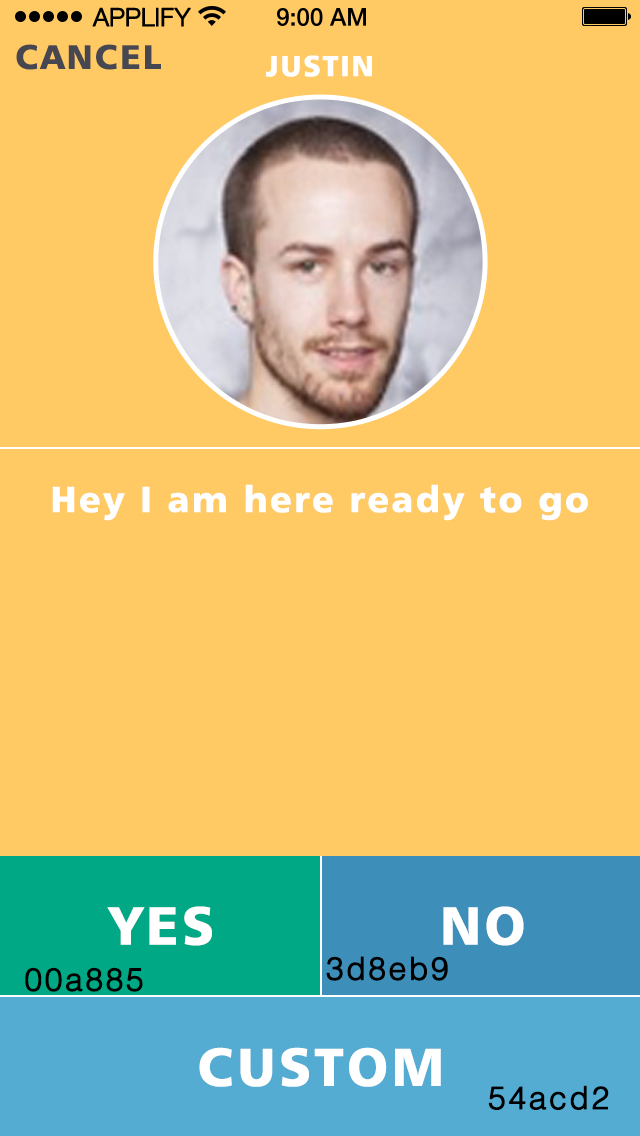
<style>
.page{position:relative;width:640px;height:1136px;background:#ffc964}
.page>*{position:absolute;margin:0}
.t1{font:25px "HelveticaNeueLTCom-Lt";letter-spacing:-0.02em;color:#000000;font-weight:bold}
.t2{font:58.3px "Humanist777BT-BlackB";letter-spacing:0.06em;color:#464751}
.t3{font:12px/62.5px "Humanist777BT-BlackB";letter-spacing:0.06em;color:#ffffff}
.t4{font:62.5px "Humanist777BT-BlackB";letter-spacing:0.06em;color:#ffffff}
.t5{font:91.7px "Humanist777BT-BlackB";letter-spacing:0.06em;color:#ffffff}
.t6{font:54.2px "HelveticaLTStd-Light";letter-spacing:0.06em;color:#000000;font-weight:bold}
</style>
<div class="page">
<p class="t1" style="left:92px;top:7px;width:99px;height:20px">APPLIFY</p>
<p class="t2" style="left:16px;top:44px;width:145px;height:26px">CANCEL</p>
<p class="t3" style="left:266px;top:55px;width:106px;height:22px;text-align:center">JUSTIN</p>
<p class="t4" style="left:52px;top:484px;width:536px;height:37px">Hey I am here ready to go</p>
<p class="t5" style="left:107px;top:906px;width:105px;height:40px">YES</p>
<p class="t5" style="left:443px;top:906px;width:81px;height:40px">NO</p>
<p class="t6" style="left:326px;top:956px;width:122px;height:25px">3d8eb9</p>
<p class="t6" style="left:25px;top:967px;width:118px;height:25px">00a885</p>
<p class="t5" style="left:199px;top:1047px;width:242px;height:40px">CUSTOM</p>
<p class="t6" style="left:488px;top:1085px;width:121px;height:25px">54acd2</p>
</div>
